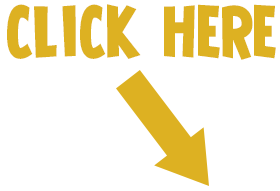
<style>
.page{position:relative;width:280px;height:191px;background:#ffffff}
.page>*{position:absolute;margin:0}
.t1{font:72px "Shermlock";color:#ddb122}
</style>
<div class="page">
<p class="t1" style="left:7px;top:4px;width:269px;height:56px">click here</p>
</div>
